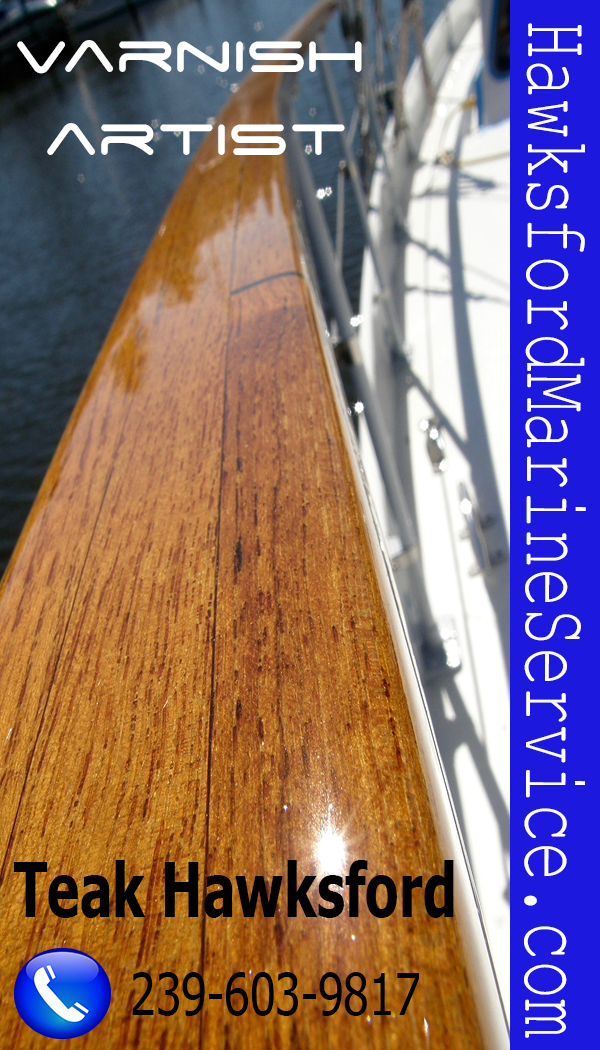
<style>
.page{position:relative;width:600px;height:1050px}
.page>*{position:absolute;margin:0}
.t1{font:93.2px "CourierNewPSMT";color:#ffffff;scale:0.7 1}
.t2{font:69.8px "SpaceAge";color:#ffffff;scale:0.95 1}
.t3{font:75px "Tahoma-Bold";color:#000000;scale:0.73 1}
.t4{font:58.3px "Tahoma";color:#000000;scale:0.8 1}
</style>
<div class="page">
<p class="t1" style="left:524px;top:23px;width:62px;height:1015px;rotate:90deg">HawksfordMarineService.com</p>
<p class="t2" style="left:17px;top:40px;width:345px;height:115px">Varnish <br> artist</p>
<p class="t3" style="left:14px;top:860px;width:440px;height:58px">Teak Hawksford</p>
<p class="t4" style="left:132px;top:972px;width:287px;height:44px">239-603-9817</p>
</div>
